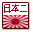
<style>
.page{position:relative;width:33px;height:32px;background:#ffffff}
.page>*{position:absolute;margin:0}
.t1{font:10.4px "SimSun";letter-spacing:-0.25em;color:#ae0012}
</style>
<div class="page">
<p class="t1" style="left:4px;top:4px;width:23px;height:9px">日本二</p>
</div>
